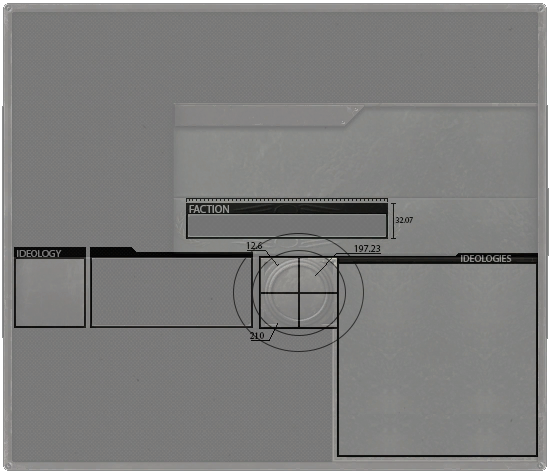
<style>
.page{position:relative;width:550px;height:474px}
.page>*{position:absolute;margin:0}
.t1{font:11px "MyriadPro-Regular";color:#949594}
.t2{font:8px "MyriadPro-Regular";color:#000000}
.t3{font:10px "MyriadPro-Regular";color:#161715}
.t4{font:10px "MyriadPro-Regular";color:#020202}
.t5{font:10px "MyriadPro-Regular";color:#797979}
.t6{font:10px "MyriadPro-Regular";color:#8e8e8a}
.t7{font:10px "MinionPro-Regular";color:#000000}
</style>
<div class="page">
<p class="t1" style="left:189px;top:205px;width:40px;height:8px">FACTION</p>
<p class="t2" style="left:395px;top:217px;width:18px;height:6px">32.07</p>
<p class="t3" style="left:246px;top:242px;width:17px;height:7px">12.6</p>
<p class="t4" style="left:354px;top:245px;width:27px;height:7px">197.23</p>
<p class="t5" style="left:17px;top:250px;width:45px;height:7px">IDEOLOGY</p>
<p class="t6" style="left:461px;top:255px;width:51px;height:7px">IDEOLOGIES</p>
<p class="t7" style="left:250px;top:332px;width:14px;height:7px">210</p>
</div>
